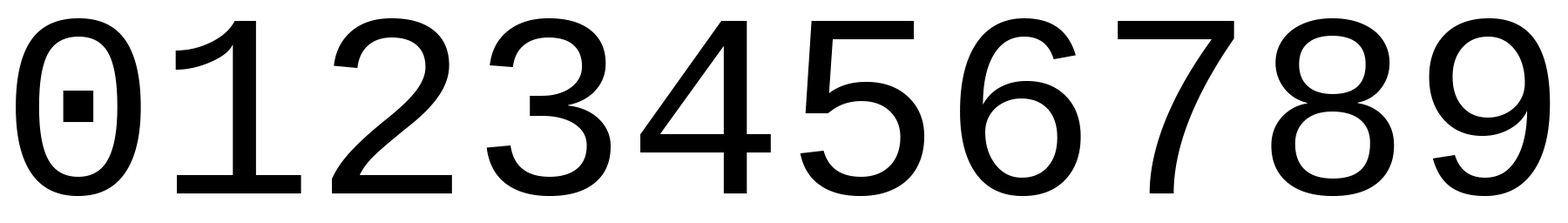
<style>
.page{position:relative;width:1568px;height:223px;background:#ffffff}
.page>*{position:absolute;margin:0}
.t1{font:261.3px "LiberationMono";color:#000000}
</style>
<div class="page">
<p class="t1" style="left:16px;top:18px;width:1535px;height:178px">0123456789</p>
</div>
